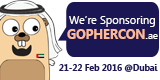
<style>
.page{position:relative;width:160px;height:80px;background:#1b1754}
.page>*{position:absolute;margin:0}
.t1{font:11.1px "Leelawadee";color:#ffffff}
.t2{font:12.7px "Leelawadee-Bold";color:#ffb997}
.t3{font:12.7px "Leelawadee";color:#ffffff}
.t4{font:9.5px "Leelawadee";color:#ffffff}
.t5{font:8.7px "Leelawadee-Bold";color:#1b1754}
</style>
<div class="page">
<p class="t1" style="left:67px;top:16px;width:91px;height:23px">We’re Sponsoring<br> <span class="t2">GOPHERCON</span><span class="t3">.</span><span class="t4">ae</span></p>
<p class="t5" style="left:59px;top:64px;width:99px;height:8px">21-22 Feb 2016 @Dubai</p>
</div>
